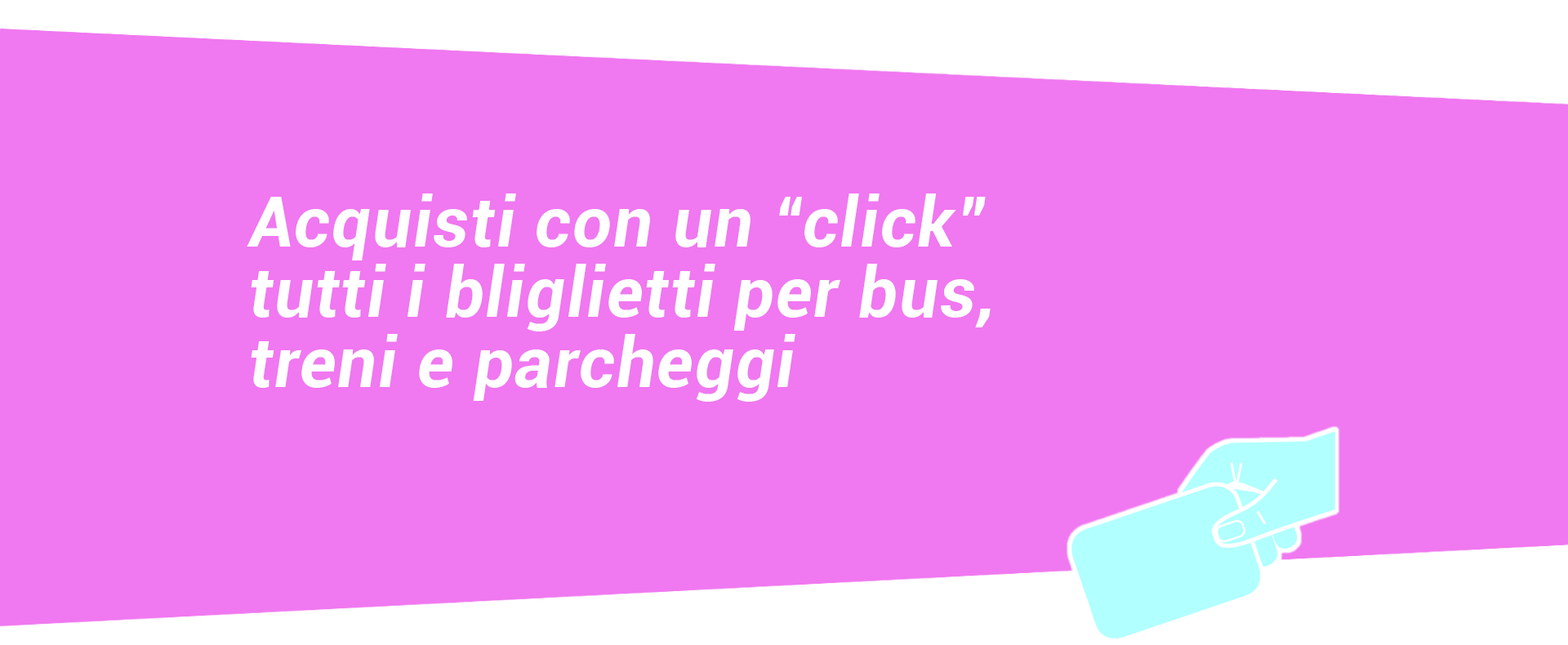
<style>
.page{position:relative;width:1568px;height:645px;background:#f078f0}
.page>*{position:absolute;margin:0}
.t1{font:69.1px/70.2px "Roboto-BoldItalic";letter-spacing:0.025em;color:#ffffff}
</style>
<div class="page">
<p class="t1" style="left:247px;top:194px;width:744px;height:208px">Acquisti con un “click”<br>tutti i bliglietti per bus,<br>treni e parcheggi</p>
</div>
